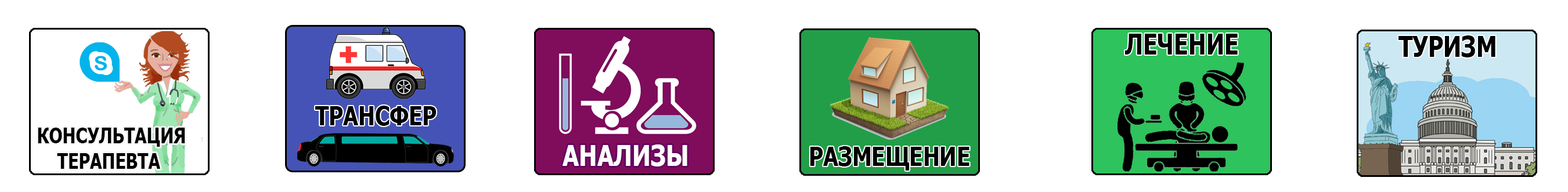
<style>
.page{position:relative;width:1568px;height:192px;background:#ffffff}
.page>*{position:absolute;margin:0}
.t1{font:28.6px "Tahoma-Bold";color:#000000;scale:0.81 1}
.t2{font:27px "Tahoma-Bold";color:#000000;scale:0.81 1}
.t3{font:21.3px "Tahoma-Bold";color:#000000;scale:0.81 1}
.t4{font:29px "Tahoma-Bold";color:#ffffff;scale:0.83 1}
</style>
<div class="page">
<p class="t1" style="left:1125px;top:34px;width:113px;height:21px">ЛЕЧЕНИЕ</p>
<p class="t1" style="left:1398px;top:35px;width:97px;height:22px">ТУРИЗМ</p>
<p class="t2" style="left:315px;top:106px;width:122px;height:20px">ТРАНСФЕР</p>
<p class="t3" style="left:38px;top:128px;width:147px;height:41px;text-align:right">КОНСУЛЬТАЦИЯ<br>    ТЕРАПЕВТА</p>
<p class="t4" style="left:563px;top:145px;width:124px;height:22px">АНАЛИЗЫ</p>
<p class="t2" style="left:810px;top:146px;width:159px;height:25px">РАЗМЕЩЕНИЕ</p>
</div>
